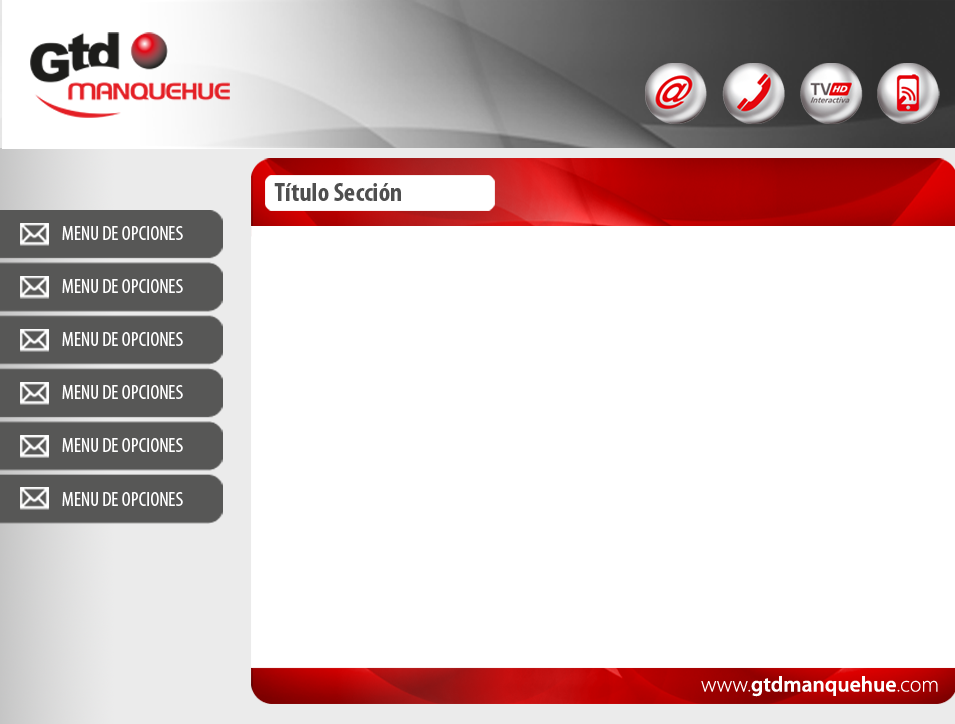
<style>
.page{position:relative;width:955px;height:724px;background:#ffffff}
.page>*{position:absolute;margin:0}
.t1{font:26.8px "MyriadPro-BoldCond";color:#4f4f4f}
.t2{font:20.1px "MyriadPro-Cond";color:#ffffff;text-transform:uppercase}
.t3{font:21.6px "MyriadPro-Semibold";color:#ffffff}
.t4{font:21.6px "MyriadPro-Light";color:#ffffff}
</style>
<div class="page">
<p class="t1" style="left:274px;top:183px;width:127px;height:18px">Título Sección</p>
<p class="t2" style="left:62px;top:226px;width:121px;height:14px">menu de opciones</p>
<p class="t2" style="left:62px;top:279px;width:121px;height:14px">menu de opciones</p>
<p class="t2" style="left:62px;top:332px;width:121px;height:14px">menu de opciones</p>
<p class="t2" style="left:62px;top:385px;width:121px;height:14px">menu de opciones</p>
<p class="t2" style="left:62px;top:438px;width:121px;height:14px">menu de opciones</p>
<p class="t2" style="left:62px;top:492px;width:121px;height:14px">menu de opciones</p>
<p class="t3" style="left:701px;top:676px;width:237px;height:21px"><span class="t4">www.</span>gtdmanquehue<span class="t4">.com</span></p>
</div>
